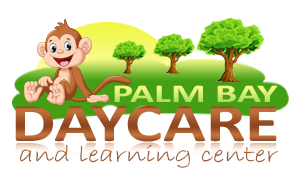
<style>
.page{position:relative;width:295px;height:181px;background:#ffffff}
.page>*{position:absolute;margin:0}
.t1{font:25.8px "Calibri-Bold";scale:1.54 1}
.t2{font:24.1px "BradleyHandITC";color:#a85b2d;scale:1.29 1}
</style>
<div class="page">
<p class="t1" style="left:114px;top:85px;width:164px;height:17px">PALM BAY</p>
<p class="t2" style="left:20px;top:144px;width:259px;height:24px">and learning center</p>
</div>
